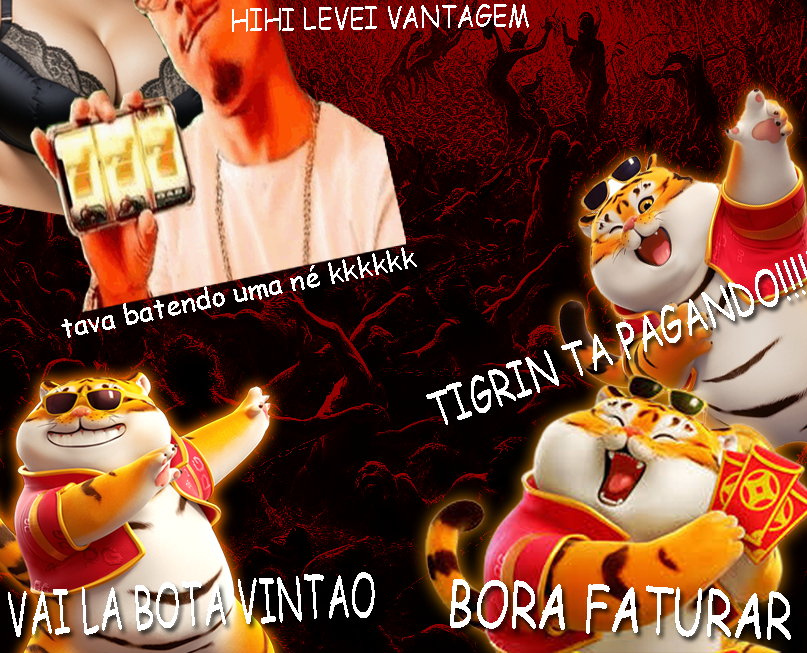
<style>
.page{position:relative;width:807px;height:653px}
.page>*{position:absolute;margin:0}
.t1{font:29.8px "ComicSansMS";color:#ffffff;scale:0.84 1}
.t2{font:28.4px "ComicSansMS";color:#ffffff}
.t3{font:59.6px "ComicSansMS";color:#ffffff;scale:0.56 1}
.t4{font:63.8px "ComicSansMS";color:#ffffff;scale:0.69 1}
</style>
<div class="page">
<p class="t1" style="left:232px;top:4px;width:297px;height:28px;rotate:-1deg">HIHI LEVEI VANTAGEM</p>
<p class="t2" style="left:61px;top:247px;width:356px;height:91px;rotate:-12deg">tava batendo uma né kkkkkk</p>
<p class="t3" style="left:8px;top:572px;width:367px;height:65px;rotate:-3deg">VAI LA BOTA VINTAO</p>
<p class="t4" style="left:450px;top:579px;width:341px;height:61px;rotate:2deg">BORA FATURAR</p>
</div>
